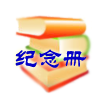
<style>
.page{position:relative;width:109px;height:98px;background:#ffffff}
.page>*{position:absolute;margin:0}
.t1{font:24px "STLiti";color:#0501c6}
</style>
<div class="page">
<p class="t1" style="left:15px;top:49px;width:72px;height:19px">纪念册</p>
</div>
